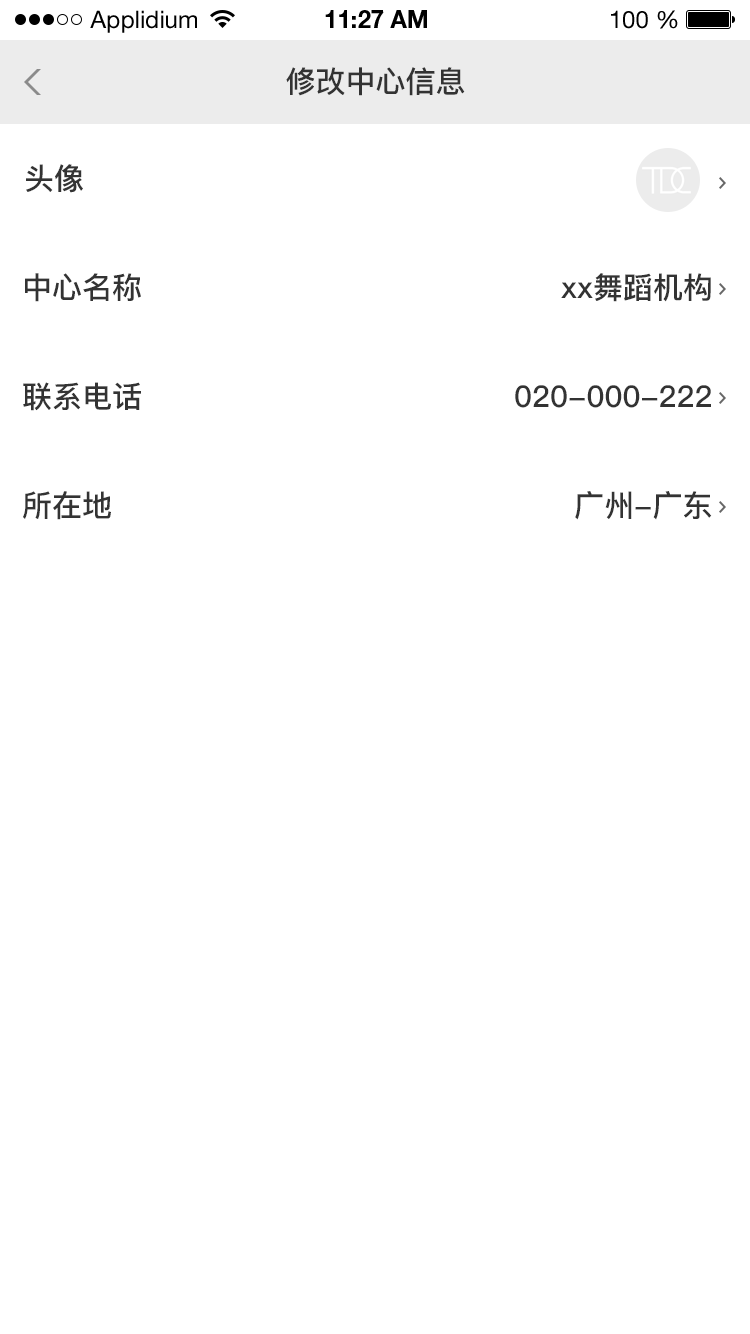
<style>
.page{position:relative;width:750px;height:1334px;background:#ffffff}
.page>*{position:absolute;margin:0}
.t1{font:24px "HelveticaNeueLTStd-Roman";color:#000000}
.t2{font:24px "HelveticaNeueLTStd-Bd";color:#000000}
.t3{font:30px "PingFang-SC-Bold";color:#333333}
</style>
<div class="page">
<p class="t1" style="left:90px;top:10px;width:107px;height:23px">Applidium</p>
<p class="t2" style="left:325px;top:10px;width:102px;height:18px">11:27 AM</p>
<p class="t1" style="left:611px;top:10px;width:67px;height:19px">100 %</p>
<p class="t3" style="left:286px;top:67px;width:179px;height:29px">修改中心信息</p>
<p class="t3" style="left:26px;top:164px;width:57px;height:29px">头像</p>
<p class="t3" style="left:25px;top:273px;width:116px;height:29px">中心名称</p>
<p class="t3" style="left:561px;top:273px;width:150px;height:29px">xx舞蹈机构</p>
<p class="t3" style="left:23px;top:382px;width:118px;height:29px">联系电话</p>
<p class="t3" style="left:515px;top:385px;width:196px;height:23px">020-000-222</p>
<p class="t3" style="left:23px;top:491px;width:88px;height:29px">所在地</p>
<p class="t3" style="left:575px;top:491px;width:137px;height:29px">广州-广东</p>
</div>
